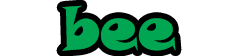
<style>
.page{position:relative;width:237px;height:56px;background:#ffffff}
.page>*{position:absolute;margin:0}
.t1{font:60px "SnapITC-Regular";color:#00a651}
</style>
<div class="page">
<p class="t1" style="left:62px;top:5px;width:114px;height:46px">bee</p>
</div>
